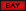
<style>
.page{position:relative;width:26px;height:11px;background:#171717}
.page>*{position:absolute;margin:0}
.t1{font:10px "ArialMT";color:#000000;font-variant:small-caps}
</style>
<div class="page">
<p class="t1" style="left:6px;top:3px;width:14px;height:5px">bay</p>
</div>
